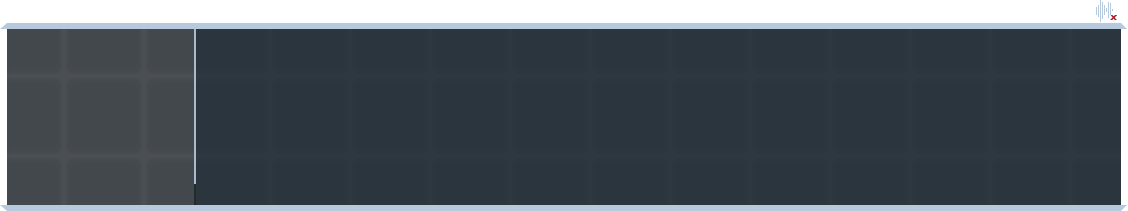
<style>
.page{position:relative;width:1128px;height:211px;background:#2a353e}
.page>*{position:absolute;margin:0}
.t1{font:10.3px "CenturyGothic-BoldItalic";letter-spacing:0.76em;color:#ac1a2f;scale:1.29 1}
</style>
<div class="page">
<p class="t1" style="left:1110px;top:15px;width:7px;height:5px">x</p>
</div>
